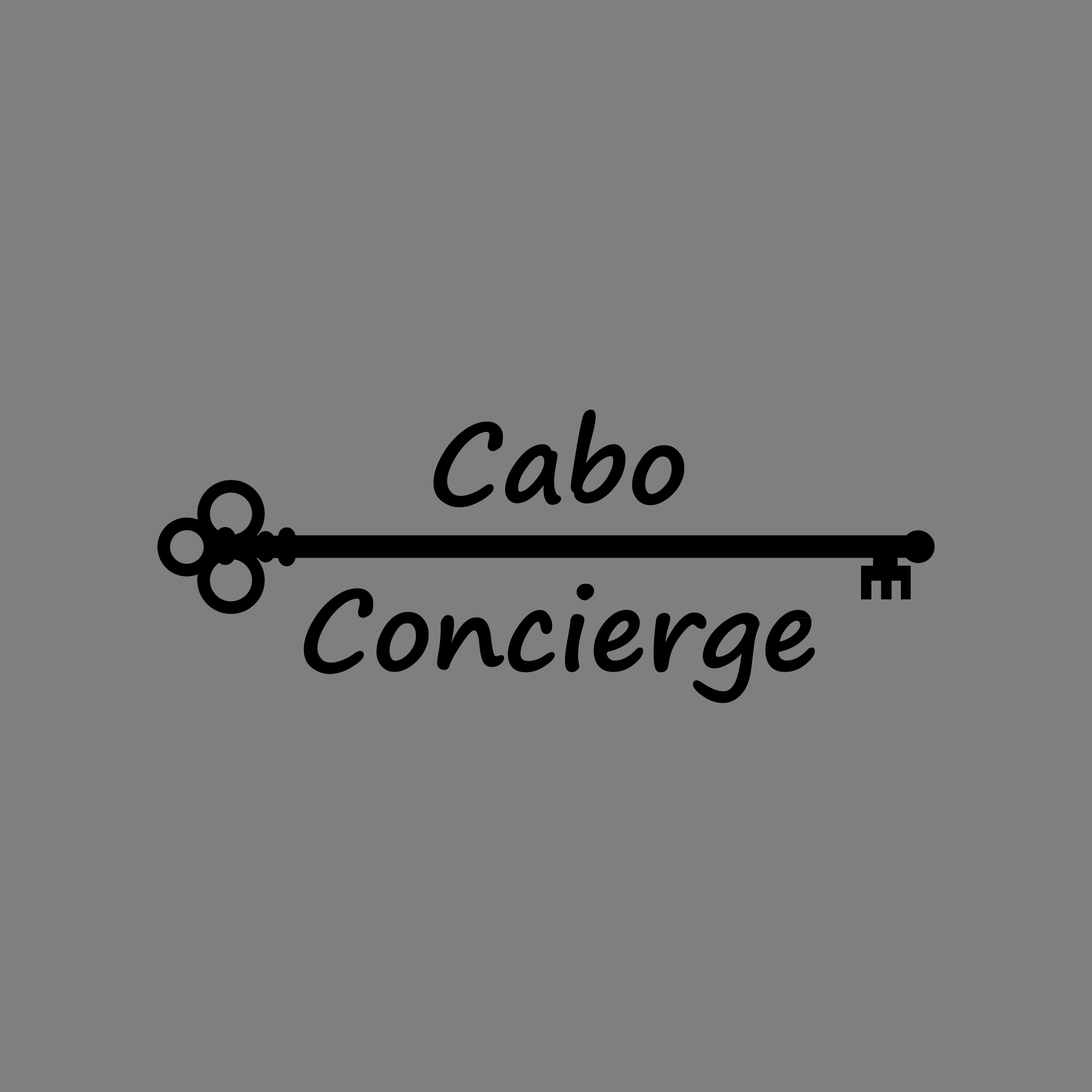
<style>
.page{position:relative;width:1092px;height:1092px;background:#7f7f7f}
.page>*{position:absolute;margin:0}
.t1{font:108.1px "SegoePrint-Bold";color:#000000}
</style>
<div class="page">
<p class="t1" style="left:434px;top:409px;width:251px;height:98px">Cabo</p>
<p class="t1" style="left:304px;top:584px;width:511px;height:119px">Concierge</p>
</div>
